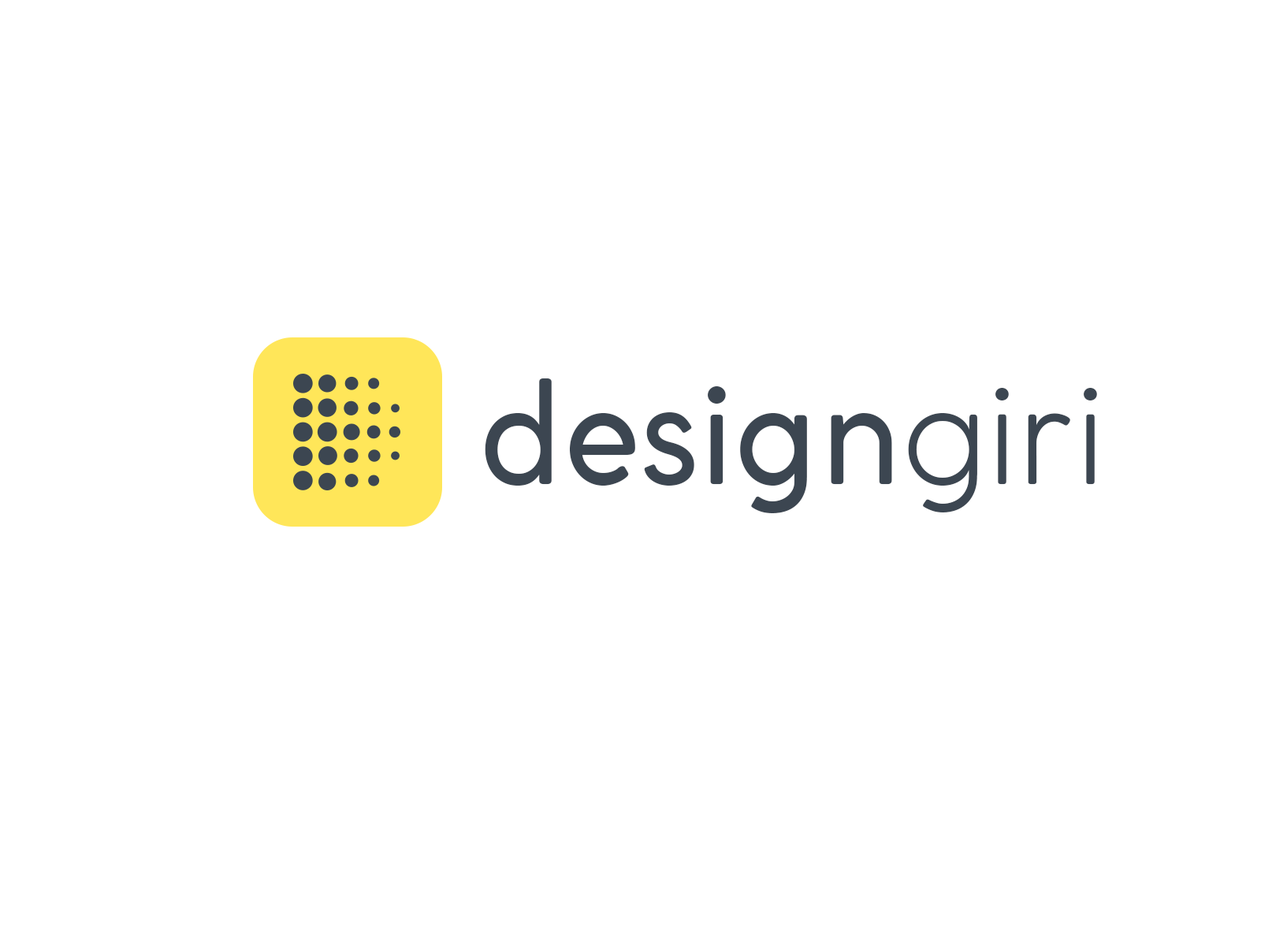
<style>
.page{position:relative;width:1261px;height:946px;background:#ffffff}
.page>*{position:absolute;margin:0}
.t1{font:141.9px "CocoGothic";color:#3c4651}
.t2{font:141.9px "CocoGothic-Light";color:#3c4651}
</style>
<div class="page">
<p class="t1" style="left:485px;top:378px;width:612px;height:135px">design<span class="t2">giri</span></p>
</div>
